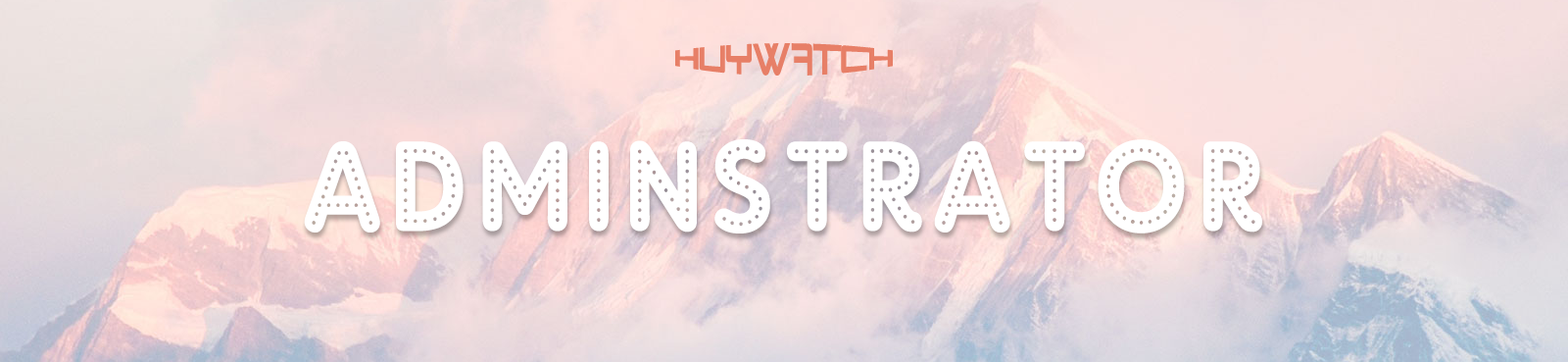
<style>
.page{position:relative;width:1568px;height:362px}
.page>*{position:absolute;margin:0}
.t1{font:127.4px "SVN-AdamGorry";letter-spacing:0.05em;color:#ffffff;font-weight:bold;scale:0.92 1}
</style>
<div class="page">
<p class="t1" style="left:304px;top:139px;width:958px;height:94px">ADMINSTRATOR</p>
</div>
